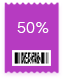
<style>
.page{position:relative;width:64px;height:79px;background:#b63bc1}
.page>*{position:absolute;margin:0}
.t1{font:18px "OriyaSangamMN";color:#ffffff}
</style>
<div class="page">
<p class="t1" style="left:17px;top:22px;width:32px;height:11px">50%</p>
</div>
